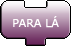
<style>
.page{position:relative;width:71px;height:46px}
.page>*{position:absolute;margin:0}
.t1{font:11px "Verdana";color:#ffffff}
</style>
<div class="page">
<p class="t1" style="left:13px;top:16px;width:46px;height:12px">PARA LÁ</p>
</div>
